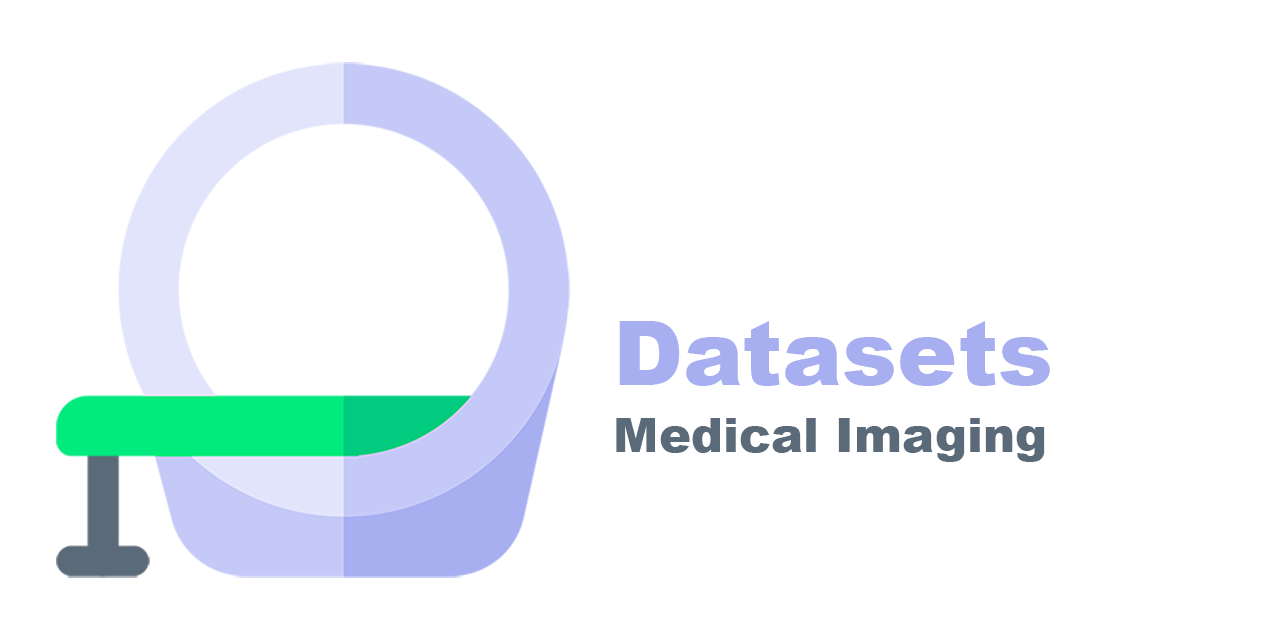
<style>
.page{position:relative;width:1280px;height:640px;background:#ffffff}
.page>*{position:absolute;margin:0}
.t1{font:90.3px "Arial-Black";color:#a8aff1}
.t2{font:48.2px "Arial-Black";color:#5a6a78}
</style>
<div class="page">
<p class="t1" style="left:619px;top:321px;width:431px;height:65px">Datasets</p>
<p class="t2" style="left:616px;top:418px;width:429px;height:44px">Medical Imaging</p>
</div>
